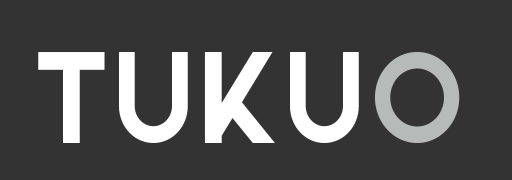
<style>
.page{position:relative;width:512px;height:180px;background:#333333}
.page>*{position:absolute;margin:0}
.t1{font:173.2px "Azedo-Bold";color:#ffffff;scale:0.93 1}
.t2{font:173.2px "Azedo-Bold";color:#b6bab9;scale:0.93 1}
</style>
<div class="page">
<p class="t1" style="left:38px;top:52px;width:321px;height:91px">Tuku</p>
<p class="t2" style="left:375px;top:52px;width:85px;height:92px">o</p>
</div>
